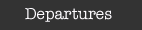
<style>
.page{position:relative;width:142px;height:30px;background:#333333}
.page>*{position:absolute;margin:0}
.t1{font:16px "AmericanTypewriter";color:#fdfbff}
</style>
<div class="page">
<p class="t1" style="left:25px;top:8px;width:87px;height:14px">Departures</p>
</div>
